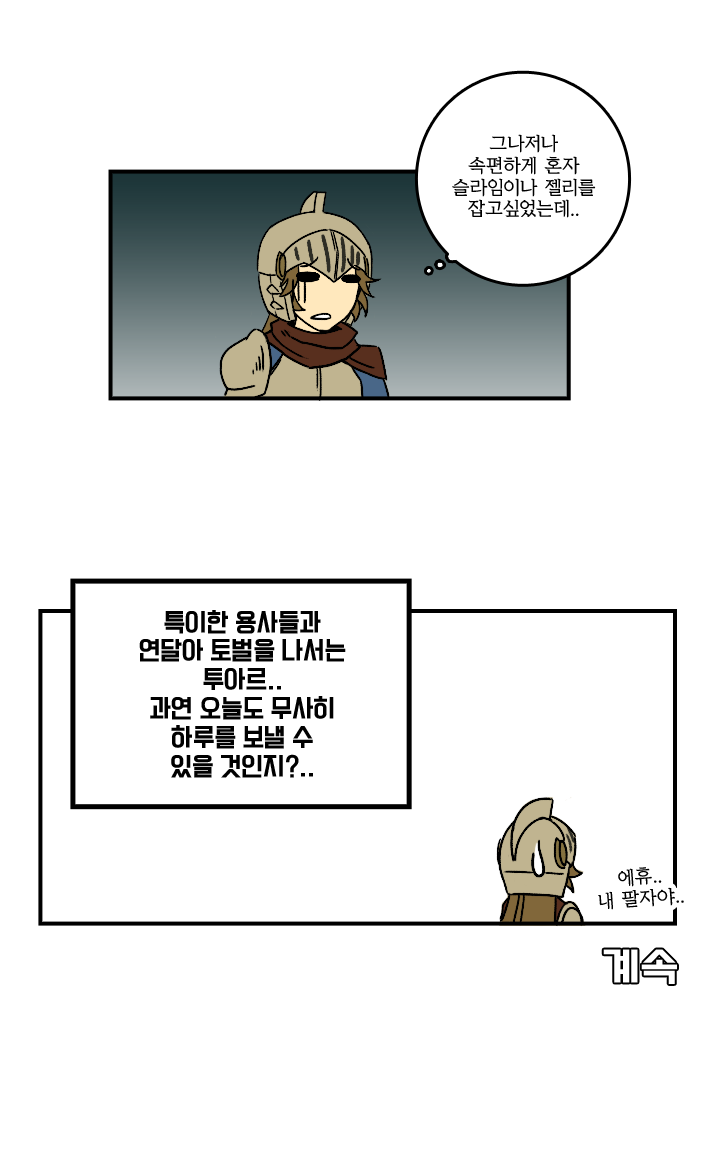
<style>
.page{position:relative;width:720px;height:1156px;background:#ffffff}
.page>*{position:absolute;margin:0}
.t1{font:18px "KoreanYMJ-B";color:#000000}
.t2{font:24px "TTComsetakR";color:#000000}
</style>
<div class="page">
<p class="t1" style="left:452px;top:134px;width:144px;height:84px;text-align:center">그나저나<br>속편하게 혼자<br>슬라임이나 젤리를<br>잡고싶었는데..</p>
<p class="t2" style="left:139px;top:610px;width:207px;height:168px;text-align:center">특이한 용사들과<br>연달아 토벌을 나서는<br>투아르..<br>과연 오늘도 무사히<br>하루를 보낼 수<br>있을 것인지?..</p>
<p class="t1" style="left:598px;top:867px;width:86px;height:43px;text-align:center;rotate:-4deg">에휴..<br>내 팔자야..</p>
</div>
